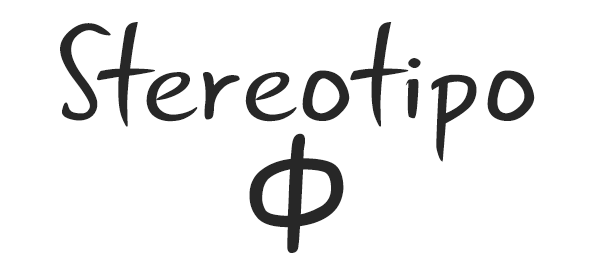
<style>
.page{position:relative;width:600px;height:266px;background:#ffffff}
.page>*{position:absolute;margin:0}
.t1{font:140px/105px "GunnyRewritten";color:#272727;scale:1.1 1}
.t2{font:180px/105px "GunnyRewritten";color:#272727;scale:1.1 1}
.t3{font:140px/130px "GunnyRewritten";color:#272727;scale:1.1 1}
</style>
<div class="page">
<p class="t1" style="left:60px;top:22px;width:475px;height:231px;text-align:center">Stereotipo<br><span class="t2">ф<br></span><span class="t3"></span></p>
</div>
